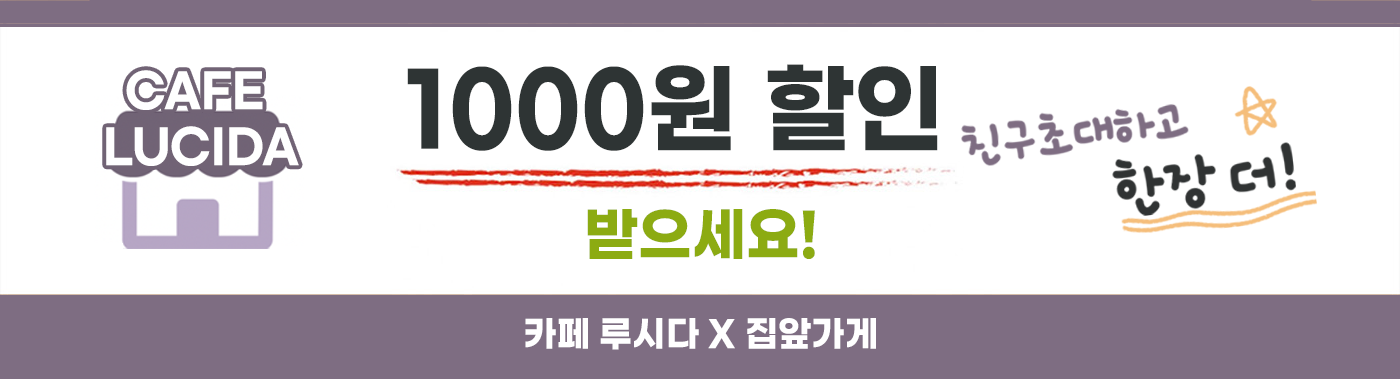
<style>
.page{position:relative;width:1400px;height:379px;background:#ffffff}
.page>*{position:absolute;margin:0}
.t1{font:98.4px "GmarketSansTTFBold";color:#2e3434;scale:0.95 1}
.t2{font:46.5px "GmarketSansTTFBold";color:#ffffff;scale:0.95 1}
.t3{font:58.8px "GmarketSansTTFBold";color:#8cab12;scale:0.95 1}
.t4{font:36.1px "GmarketSansTTFBold";color:#ffffff;scale:0.95 1}
</style>
<div class="page">
<p class="t1" style="left:407px;top:64px;width:531px;height:87px">1000원 할인</p>
<p class="t2" style="left:106px;top:70px;width:193px;height:96px;text-align:center">CAFE <br>LUCIDA</p>
<p class="t3" style="left:587px;top:209px;width:228px;height:50px">받으세요!</p>
<p class="t4" style="left:525px;top:318px;width:351px;height:32px">카페 루시다 X 집앞가게</p>
</div>
